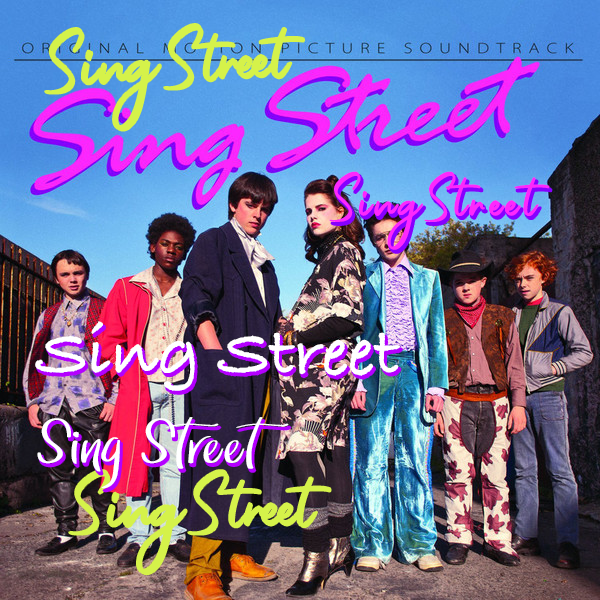
<style>
.page{position:relative;width:600px;height:600px}
.page>*{position:absolute;margin:0}
.t1{font:95px "Orchide";letter-spacing:0.005em;color:#d5f24a;font-weight:bold}
.t2{font:90px "Orchide";letter-spacing:0.05em;color:#d5f24a;font-weight:bold}
.t3{font:98px "Orchide";letter-spacing:0.05em;color:#d5f24a;font-weight:bold}
.t4{font:90px "Orchide";letter-spacing:0.075em;color:#d5f24a;font-weight:bold}
.t5{font:85px "Orchide";letter-spacing:0.01em;color:#d5f24a;font-weight:bold}
.t6{font:100px "Orchide";letter-spacing:-0.025em;color:#d5f24a}
.t7{font:104px "Orchide";letter-spacing:-0.025em;color:#d5f24a}
.t8{font:104px "Orchide";letter-spacing:-0.01em;color:#d5f24a}
.t9{font:70px "Orchide";letter-spacing:0.05em;color:#fd28fc;font-weight:bold}
.t10{font:70px "BradleyHandITCTT-Bold";color:#ffffff}
.t11{font:70px "ThumblerDemoRegular";color:#ffffff}
</style>
<div class="page">
<p class="t1" style="left:45px;top:24px;width:259px;height:107px;rotate:-2deg"><span class="t2">S</span>in<span class="t3">g</span><span class="t4">S</span><span class="t5">t</span><span class="t6">r</span><span class="t7">e</span><span class="t8">e</span><span class="t2">t</span></p>
<p class="t9" style="left:329px;top:171px;width:221px;height:79px">SingStreet</p>
<p class="t10" style="left:35px;top:321px;width:365px;height:70px">Sing Street</p>
<p class="t11" style="left:37px;top:417px;width:252px;height:72px">Sing Street</p>
<p class="t1" style="left:69px;top:470px;width:262px;height:105px"><span class="t2">S</span>in<span class="t3">g</span><span class="t4">S</span><span class="t5">t</span><span class="t6">r</span><span class="t7">e</span><span class="t8">e</span><span class="t2">t</span></p>
</div>
